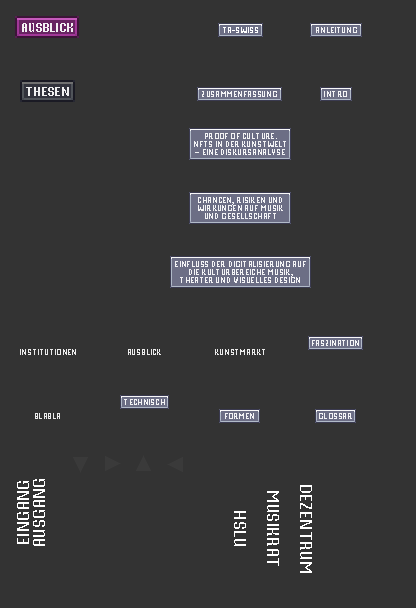
<style>
.page{position:relative;width:416px;height:608px;background:#333333}
.page>*{position:absolute;margin:0}
.t1{font:12.5px "VTFMisterPixel";color:#ffffff}
.t2{font:8.3px "VTFMisterPixel";color:#ffffff}
.t3{font:8.3px/8.3px "VTFMisterPixel";color:#ffffff;text-transform:uppercase}
.t4{font:8.3px "VTFMisterPixel";color:#ffffff;text-transform:uppercase}
.t5{font:16.7px/16.7px "VTFMisterPixel";color:#ffffff;text-transform:uppercase}
.t6{font:16.7px "VTFMisterPixel";color:#ffffff;text-transform:uppercase}
</style>
<div class="page">
<p class="t1" style="left:22px;top:23px;width:51px;height:9px;opacity:0.9">AUSBLICK</p>
<p class="t2" style="left:223px;top:27px;width:35px;height:6px">TA-SWISS</p>
<p class="t2" style="left:316px;top:27px;width:41px;height:6px;opacity:0.9">ANLEITUNG</p>
<p class="t1" style="left:26px;top:87px;width:43px;height:9px;opacity:0.9">THESEN</p>
<p class="t2" style="left:202px;top:91px;width:75px;height:6px;opacity:0.9">ZUSAMMENFASSUNG</p>
<p class="t2" style="left:324px;top:91px;width:23px;height:6px;opacity:0.9">INTRO</p>
<p class="t3" style="left:194px;top:133px;width:92px;height:22px;text-align:center;opacity:0.9">Proof of Culture.<br>NFTs in der Kunstwelt<br>– eine Diskursanalyse</p>
<p class="t3" style="left:198px;top:197px;width:85px;height:22px;text-align:center;opacity:0.9">Chancen, Risiken und<br>Wirkungen auf Musik<br>und Gesellschaft</p>
<p class="t3" style="left:175px;top:261px;width:131px;height:22px;text-align:center;opacity:0.9">Einfluss der Digitalisierung auf<br>die Kulturbereiche Musik,<br>Theater und Visuelles Design</p>
<p class="t4" style="left:312px;top:340px;width:47px;height:6px;opacity:0.9">Faszination</p>
<p class="t4" style="left:20px;top:349px;width:56px;height:6px;opacity:0.9">Institutionen</p>
<p class="t2" style="left:128px;top:349px;width:33px;height:6px;opacity:0.9">AUSBLICK</p>
<p class="t2" style="left:215px;top:349px;width:50px;height:6px;opacity:0.9">KUNSTMARKT</p>
<p class="t4" style="left:124px;top:399px;width:41px;height:6px;opacity:0.9">Technisch</p>
<p class="t4" style="left:35px;top:413px;width:25px;height:6px;opacity:0.9">blabla</p>
<p class="t4" style="left:225px;top:413px;width:29px;height:6px;opacity:0.9">Formen</p>
<p class="t4" style="left:319px;top:413px;width:33px;height:6px;opacity:0.9">glossar</p>
<p class="t5" style="left:17px;top:479px;width:28px;height:67px;text-align:center;rotate:-90deg">eingang<br>ausgang</p>
<p class="t6" style="left:300px;top:485px;width:12px;height:88px;rotate:90deg">Dezentrum</p>
<p class="t6" style="left:267px;top:491px;width:12px;height:75px;rotate:90deg">Musikrat</p>
<p class="t6" style="left:234px;top:511px;width:12px;height:35px;rotate:90deg">Hslu</p>
</div>
